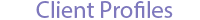
<style>
.page{position:relative;width:200px;height:20px;background:#ffffff}
.page>*{position:absolute;margin:0}
.t1{font:24px "MyriadPro-Regular";color:#7e78bd}
</style>
<div class="page">
<p class="t1" style="left:36px;top:1px;width:137px;height:17px">Client Profiles</p>
</div>
